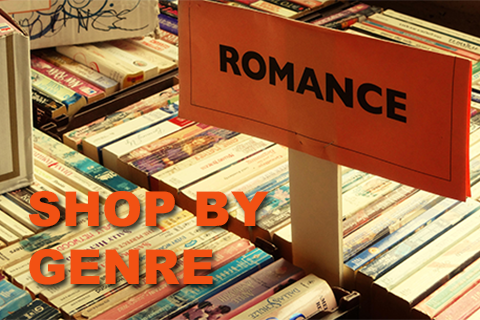
<style>
.page{position:relative;width:480px;height:320px}
.page>*{position:absolute;margin:0}
.t1{font:48.3px "Arial-Black";color:#f25113}
</style>
<div class="page">
<p class="t1" style="left:28px;top:191px;width:241px;height:94px">SHOP BY <br>GENRE</p>
</div>
